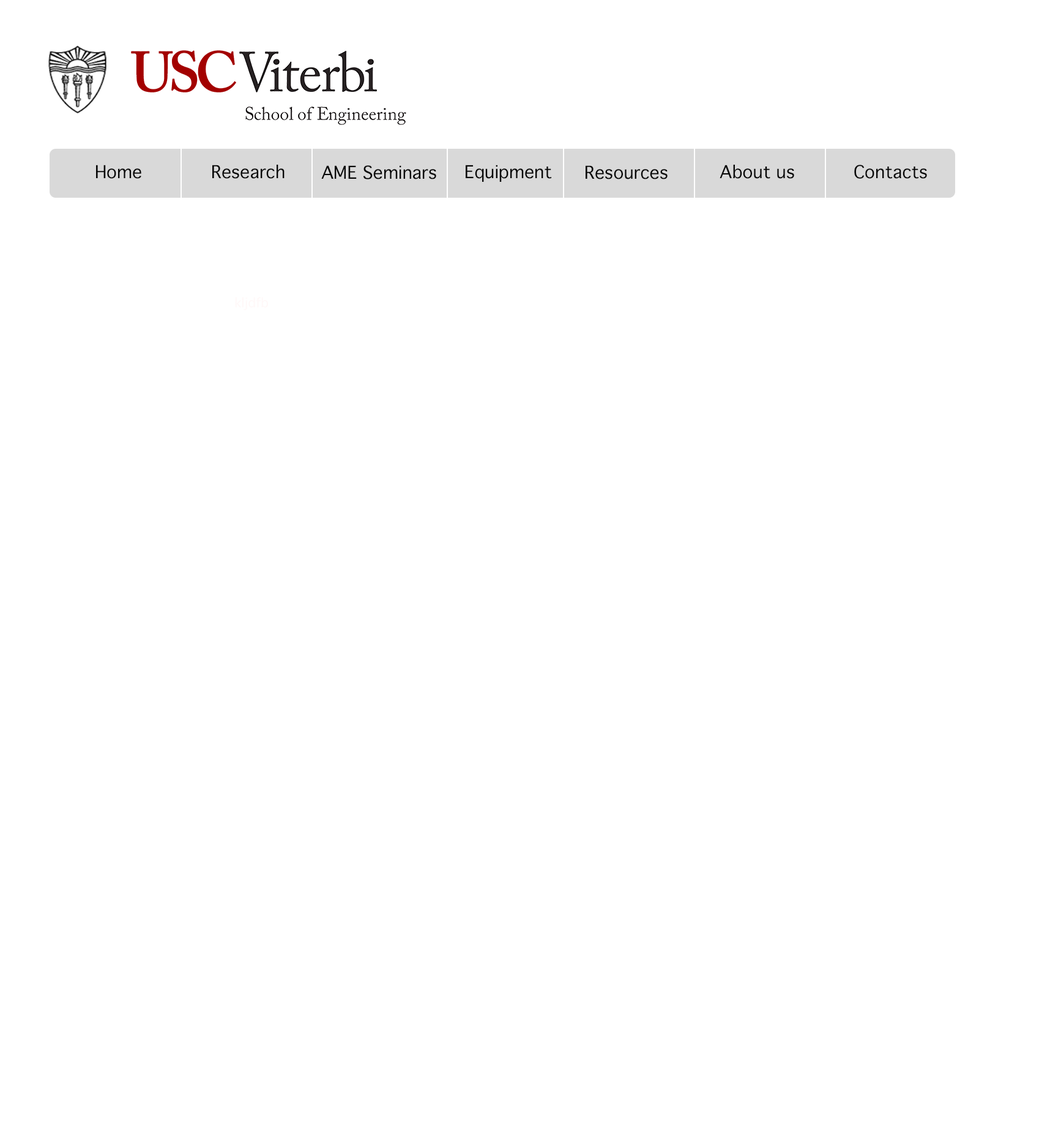
<style>
.page{position:relative;width:1061px;height:1124px;background:#ffffff}
.page>*{position:absolute;margin:0}
.t1{font:17.1px "Thonburi";color:#050505}
.t2{font:12.9px "Thonburi";color:#fff8f8}
</style>
<div class="page">
<p class="t1" style="left:96px;top:165px;width:45px;height:14px">Home</p>
<p class="t1" style="left:212px;top:165px;width:73px;height:14px">Research</p>
<p class="t1" style="left:321px;top:165px;width:115px;height:14px">AME Seminars</p>
<p class="t1" style="left:466px;top:165px;width:85px;height:17px">Equipment</p>
<p class="t1" style="left:586px;top:165px;width:82px;height:14px">Resources</p>
<p class="t1" style="left:720px;top:165px;width:74px;height:14px">About us</p>
<p class="t1" style="left:854px;top:165px;width:73px;height:14px">Contacts</p>
<p class="t2" style="left:235px;top:297px;width:33px;height:13px">kljdfb</p>
</div>
